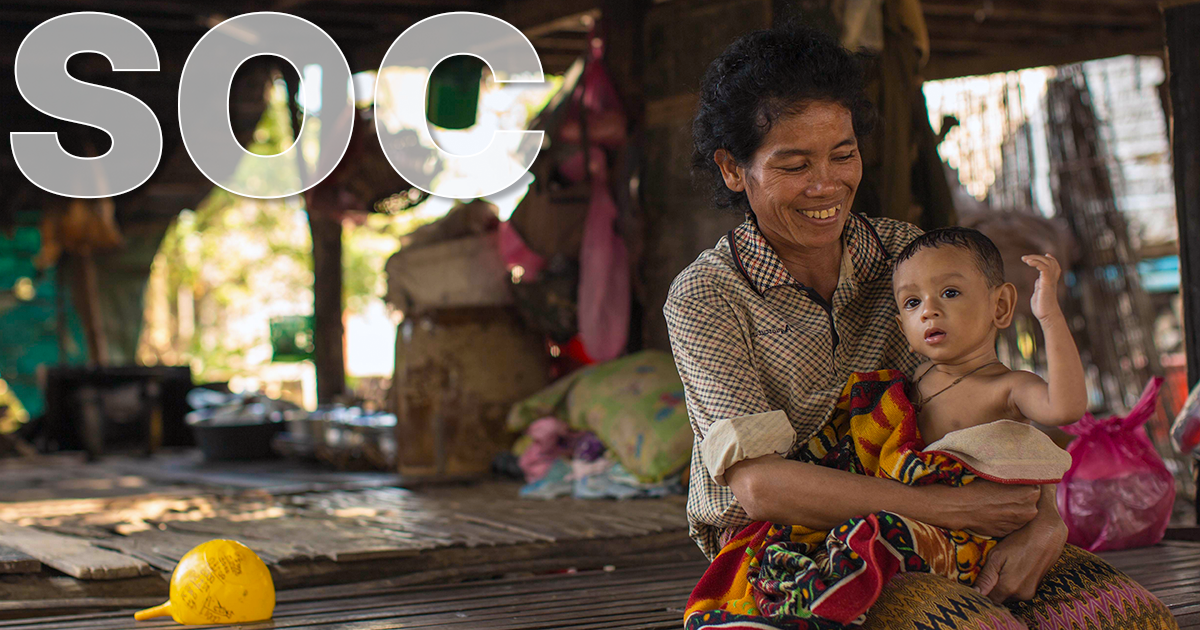
<style>
.page{position:relative;width:1200px;height:630px}
.page>*{position:absolute;margin:0}
.t1{font:250px "Inter-Black"}
</style>
<div class="page">
<p class="t1" style="left:10px;top:11px;width:535px;height:188px">SOC</p>
</div>
